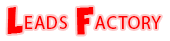
<style>
.page{position:relative;width:170px;height:41px;background:#ffffff}
.page>*{position:absolute;margin:0}
.t1{font:18px "MyriadPro-Regular";letter-spacing:0.05em;color:#ff0000;text-transform:uppercase}
.t2{font:18px "ComixLoud";letter-spacing:0.05em;color:#ff0000;text-transform:uppercase}
</style>
<div class="page">
<p class="t1" style="left:7px;top:7px;width:154px;height:28px"><span class="t2">L</span>eads <span class="t2">F</span>actory</p>
</div>
